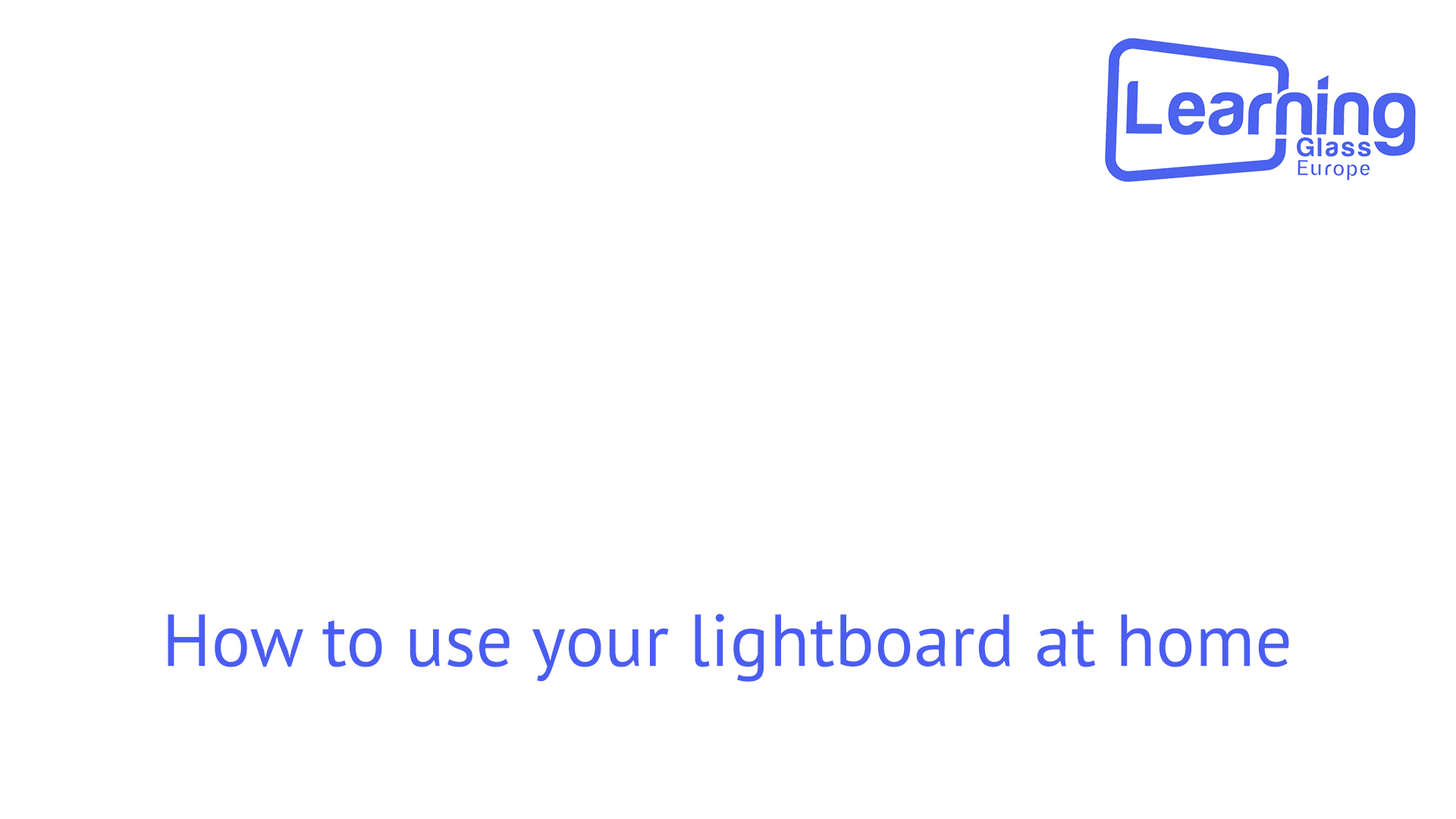
<style>
.page{position:relative;width:1456px;height:819px;background:#ffffff}
.page>*{position:absolute;margin:0}
.t1{font:73.6px "PTSans-Regular";color:#4a5df2}
</style>
<div class="page">
<p class="t1" style="left:168px;top:613px;width:1121px;height:69px">How to use your lightboard at home</p>
</div>
